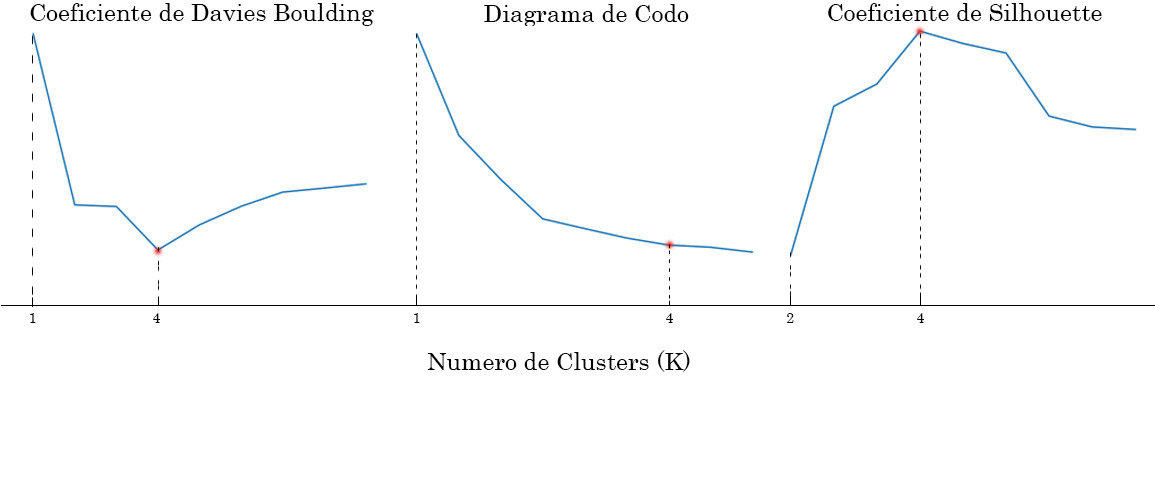
<style>
.page{position:relative;width:1155px;height:500px;background:#ffffff}
.page>*{position:absolute;margin:0}
.t1{font:14px "Century";color:#000000}
.t2{font:24px "Century";color:#000000}
</style>
<div class="page">
<p class="t1" style="left:30px;top:313px;width:6px;height:10px">1</p>
<p class="t1" style="left:153px;top:313px;width:7px;height:10px">4</p>
<p class="t1" style="left:414px;top:313px;width:6px;height:10px">1</p>
<p class="t1" style="left:666px;top:313px;width:7px;height:10px">4</p>
<p class="t1" style="left:786px;top:313px;width:8px;height:10px">2</p>
<p class="t1" style="left:917px;top:313px;width:7px;height:10px">4</p>
<p class="t2" style="left:427px;top:350px;width:263px;height:22px">Numero de Clusters (K)</p>
</div>
